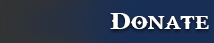
<style>
.page{position:relative;width:214px;height:43px}
.page>*{position:absolute;margin:0}
.t1{font:25px "GodOfWar";color:#ffffff}
</style>
<div class="page">
<p class="t1" style="left:110px;top:13px;width:99px;height:16px">Donate</p>
</div>
